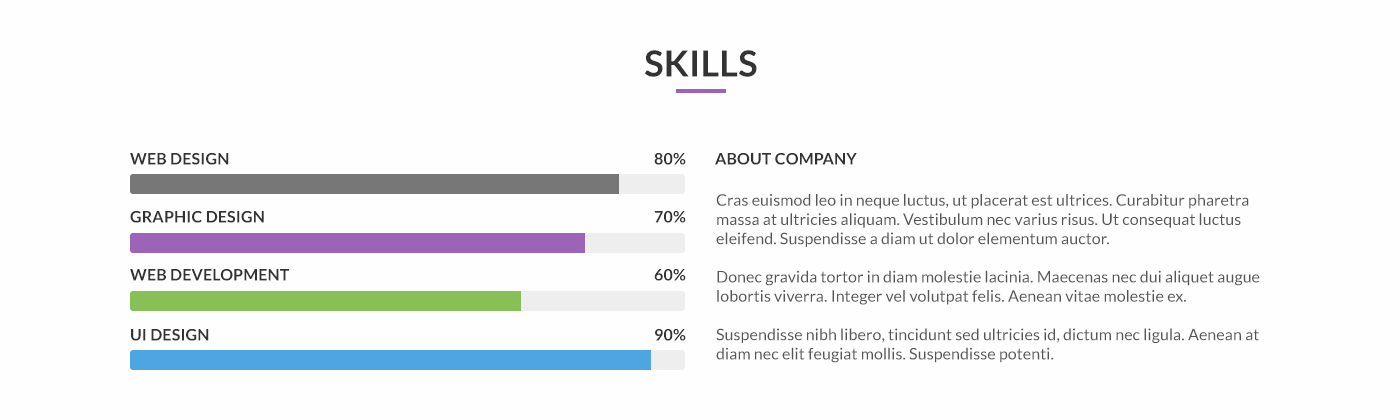
<style>
.page{position:relative;width:1400px;height:420px;background:#fefefe}
.page>*{position:absolute;margin:0}
.t1{font:36px "Lato-Bold";letter-spacing:0.005em;color:#333333}
.t2{font:16px "Lato-Bold";letter-spacing:0.01em;color:#333333}
.t3{font:16px "Lato-Regular";letter-spacing:0.005em;color:#555555}
</style>
<div class="page">
<p class="t1" style="left:645px;top:50px;width:112px;height:27px">SKILLS</p>
<p class="t2" style="left:130px;top:153px;width:99px;height:12px">WEB DESIGN</p>
<p class="t2" style="left:654px;top:152px;width:32px;height:13px">80%</p>
<p class="t2" style="left:715px;top:153px;width:142px;height:12px">ABOUT COMPANY</p>
<p class="t3" style="left:716px;top:194px;width:544px;height:169px">Cras euismod leo in neque luctus, ut placerat est ultrices. Curabitur pharetra massa at ultricies aliquam. Vestibulum nec varius risus. Ut consequat luctus eleifend. Suspendisse a diam ut dolor elementum auctor.<br><br>Donec gravida tortor in diam molestie lacinia. Maecenas nec dui aliquet augue lobortis viverra. Integer vel volutpat felis. Aenean vitae molestie ex.<br><br>Suspendisse nibh libero, tincidunt sed ultricies id, dictum nec ligula. Aenean at diam nec elit feugiat mollis. Suspendisse potenti.</p>
<p class="t2" style="left:130px;top:211px;width:134px;height:12px">GRAPHIC DESIGN</p>
<p class="t2" style="left:654px;top:210px;width:32px;height:13px">70%</p>
<p class="t2" style="left:130px;top:269px;width:159px;height:12px">WEB DEVELOPMENT</p>
<p class="t2" style="left:654px;top:268px;width:32px;height:13px">60%</p>
<p class="t2" style="left:131px;top:329px;width:78px;height:12px">UI DESIGN</p>
<p class="t2" style="left:655px;top:328px;width:31px;height:13px">90%</p>
</div>
